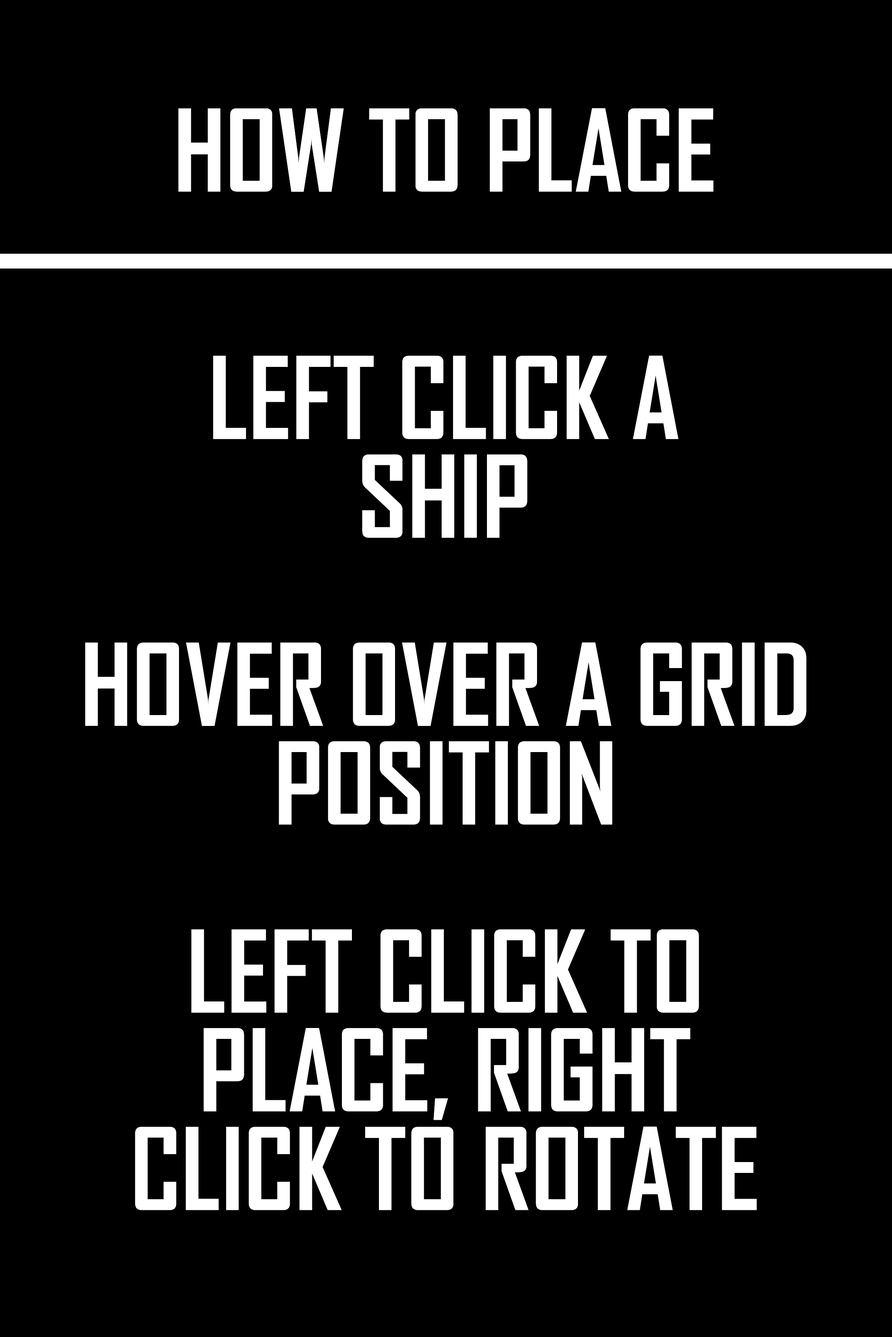
<style>
.page{position:relative;width:892px;height:1337px;background:#000000}
.page>*{position:absolute;margin:0}
.t1{font:108.8px "AgencyFB-Bold";color:#ffffff}
.t2{font:108.8px/32.9px "AgencyFB-Bold";color:#ffffff}
</style>
<div class="page">
<p class="t1" style="left:178px;top:108px;width:535px;height:84px">HOW TO PLACE</p>
<p class="t2" style="left:213px;top:356px;width:465px;height:182px;text-align:center">LEFT CLICK A<br><br><br>SHIP</p>
<p class="t2" style="left:85px;top:643px;width:721px;height:182px;text-align:center">HOVER OVER A GRID<br><br><br>POSITION</p>
<p class="t2" style="left:135px;top:929px;width:622px;height:282px;text-align:center">LEFT CLICK TO<br><br><br>PLACE, RIGHT<br><br><br>CLICK TO ROTATE</p>
</div>
